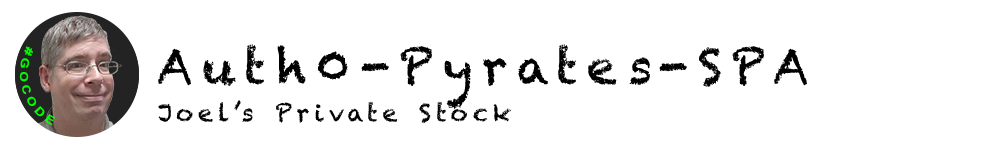
<style>
.page{position:relative;width:1000px;height:150px;background:#ffffff}
.page>*{position:absolute;margin:0}
.t1{font:11.2px "Arial-BoldMT";letter-spacing:0.2em;color:#00ff00}
.t2{font:48px "Chalkduster";letter-spacing:0.2em;color:#000000}
.t3{font:24px "Chalkduster";letter-spacing:0.2em;color:#000000}
</style>
<div class="page">
<p class="t1" style="left:19px;top:46px;width:37px;height:80px;rotate:72deg">#GOCODE</p>
<p class="t2" style="left:158px;top:44px;width:649px;height:66px">Auth0-Pyrates-SPA</p>
<p class="t3" style="left:158px;top:100px;width:353px;height:23px">Joel’s Private Stock</p>
</div>
